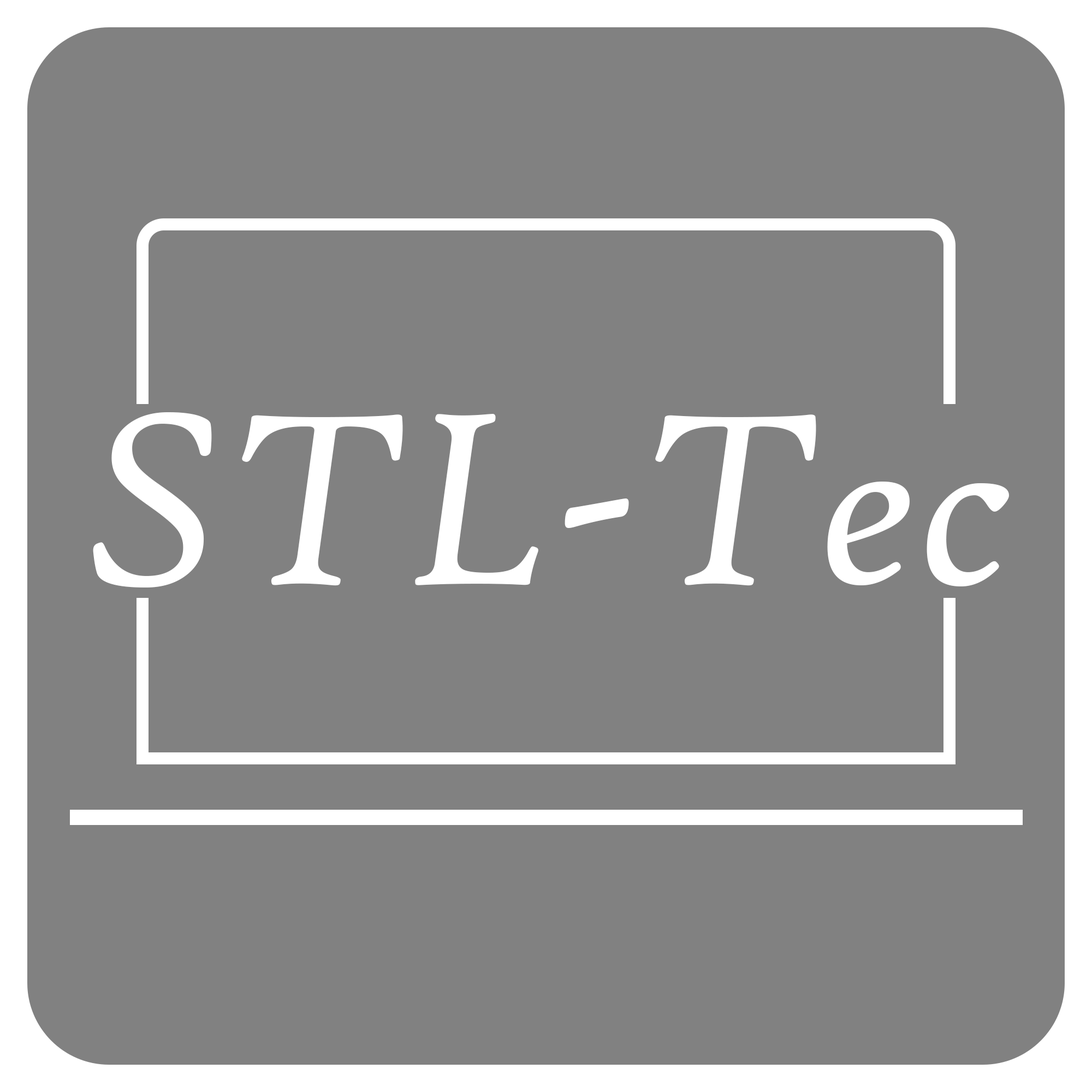
<style>
.page{position:relative;width:1092px;height:1092px;background:#818181}
.page>*{position:absolute;margin:0}
.t1{font:262.1px "HighTowerText-Italic";color:#ffffff}
</style>
<div class="page">
<p class="t1" style="left:93px;top:412px;width:916px;height:175px">STL-Tec</p>
</div>
